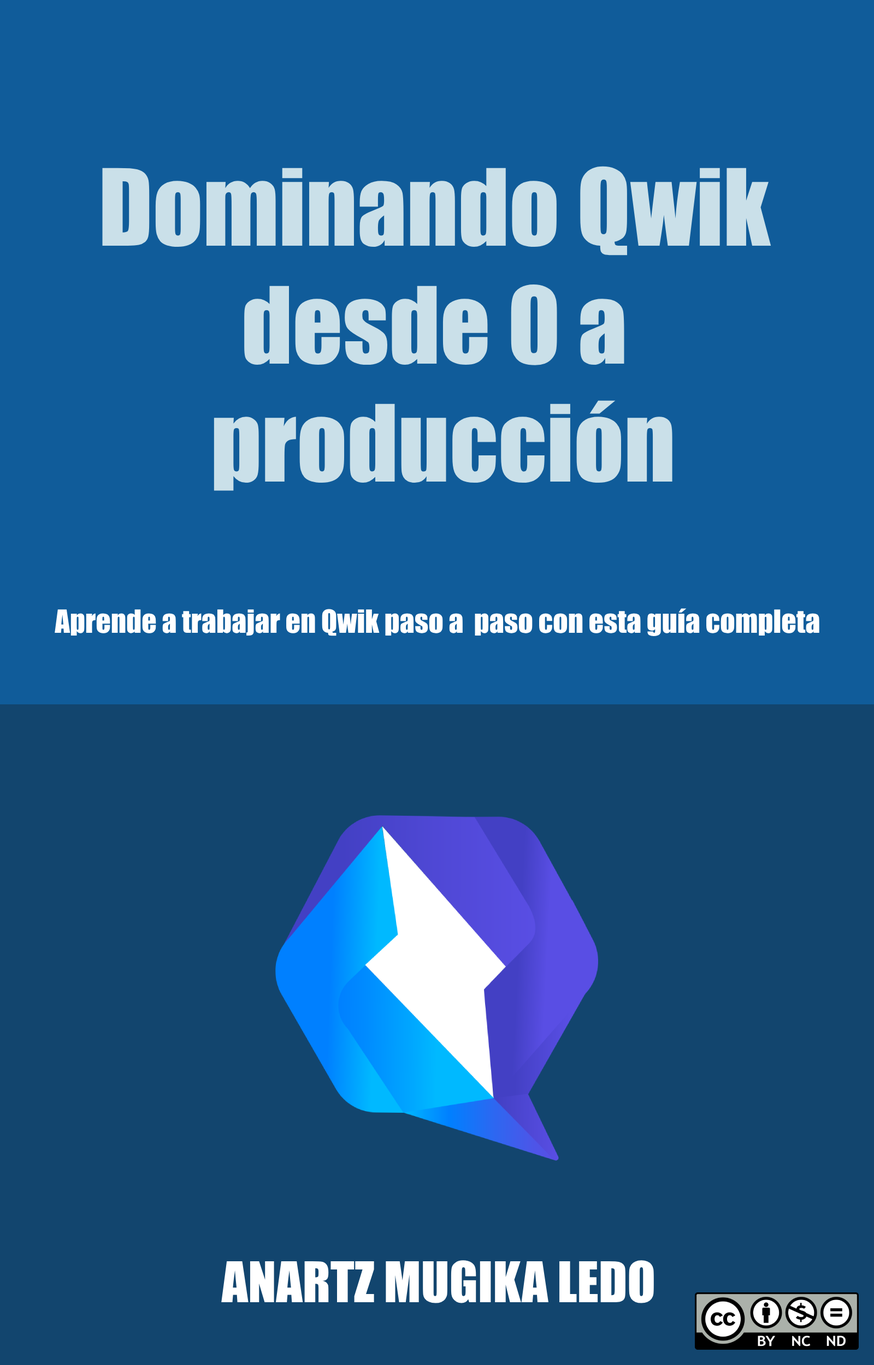
<style>
.page{position:relative;width:874px;height:1365px;background:#105c9a}
.page>*{position:absolute;margin:0}
.t1{font:98.3px "Impact";color:#cae0e9}
.t2{font:29.5px "Impact";color:#ffffff}
.t3{font:51.9px "Impact";color:#ffffff}
</style>
<div class="page">
<p class="t1" style="left:102px;top:166px;width:669px;height:325px;text-align:center">Dominando Qwik <br>desde 0 a <br>producción</p>
<p class="t2" style="left:55px;top:608px;width:764px;height:29px">Aprende a trabajar en Qwik paso a  paso con esta guía completa</p>
<p class="t3" style="left:221px;top:1260px;width:433px;height:43px">ANARTZ MUGIKA LEDO</p>
</div>
